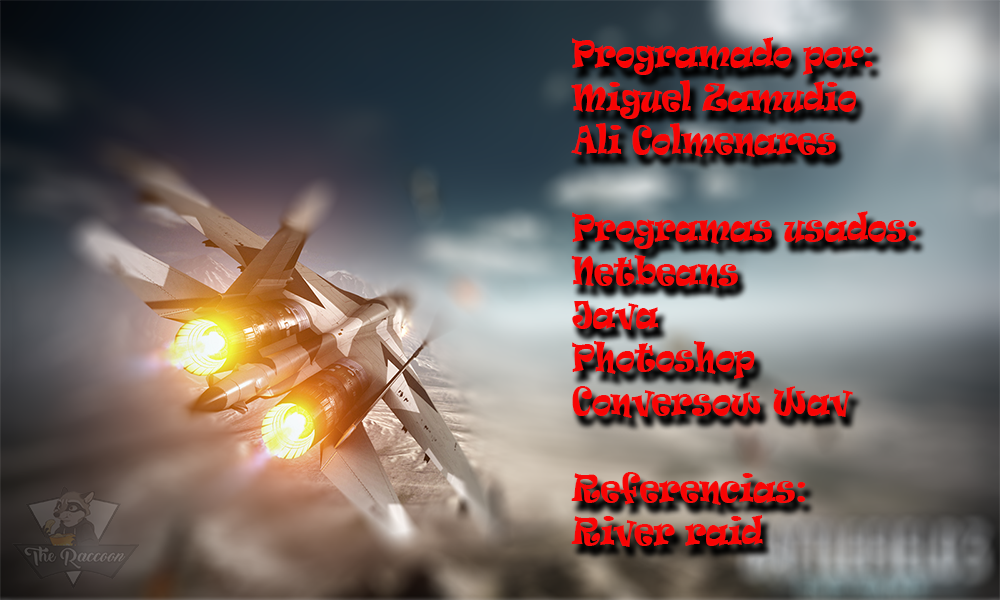
<style>
.page{position:relative;width:1000px;height:600px}
.page>*{position:absolute;margin:0}
.t1{font:36.2px "Ravie";color:#f80303;scale:0.74 1}
</style>
<div class="page">
<p class="t1" style="left:571px;top:37px;width:346px;height:510px">Programado por:<br>Miguel Zamudio<br>Ali Colmenares<br><br>Programas usados:<br>Netbeans<br>Java<br>Photoshop<br>Conversow Wav<br><br>Referencias:<br>River raid</p>
</div>
